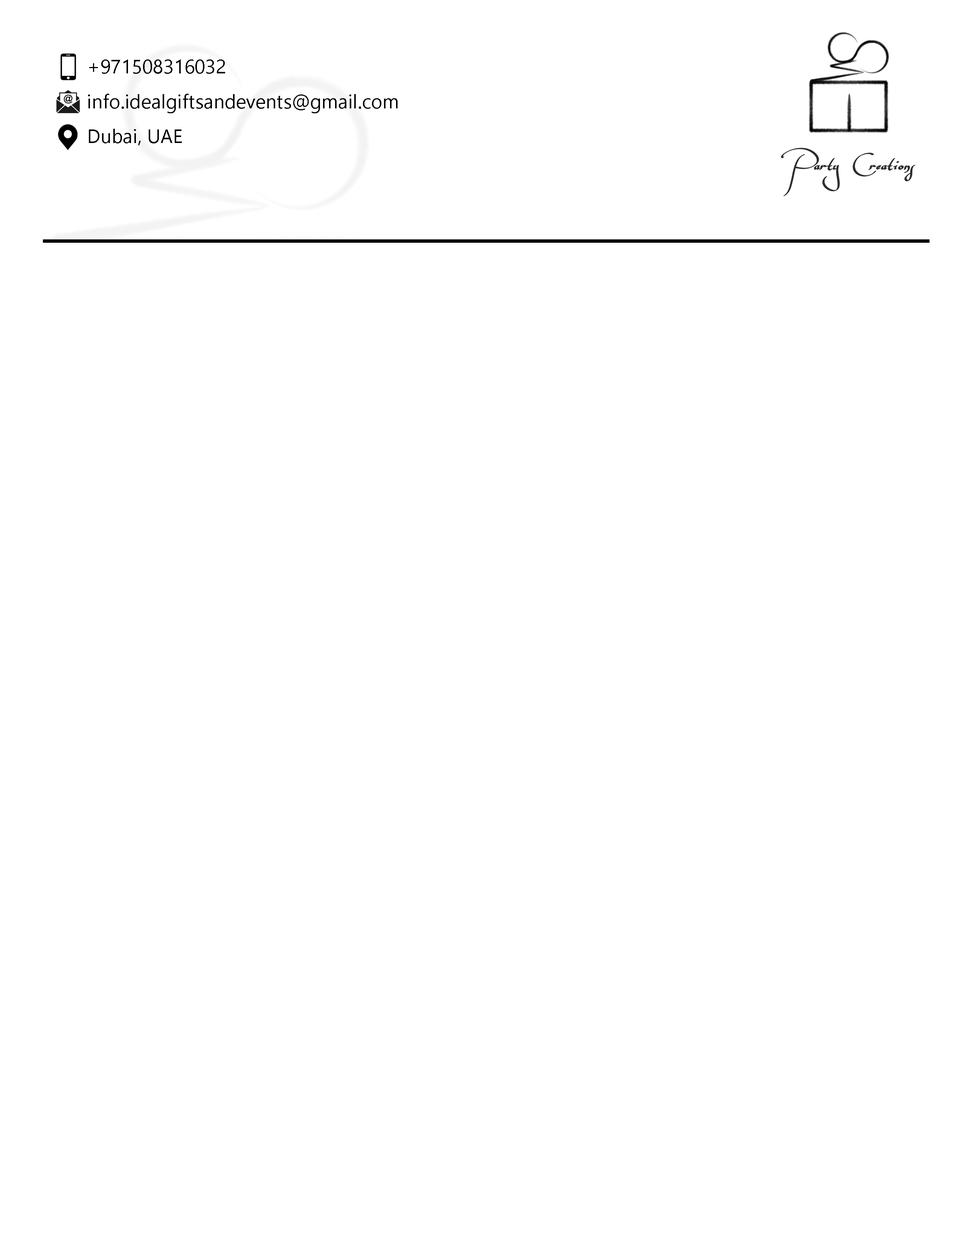
<style>
.page{position:relative;width:960px;height:1242px;background:#ffffff}
.page>*{position:absolute;margin:0}
.t1{font:19.1px/34.9px "NirmalaUI";letter-spacing:0.01em;color:#000000}
</style>
<div class="page">
<p class="t1" style="left:88px;top:59px;width:310px;height:86px">+971508316032<br>info.idealgiftsandevents@gmail.com<br>Dubai, UAE</p>
</div>
